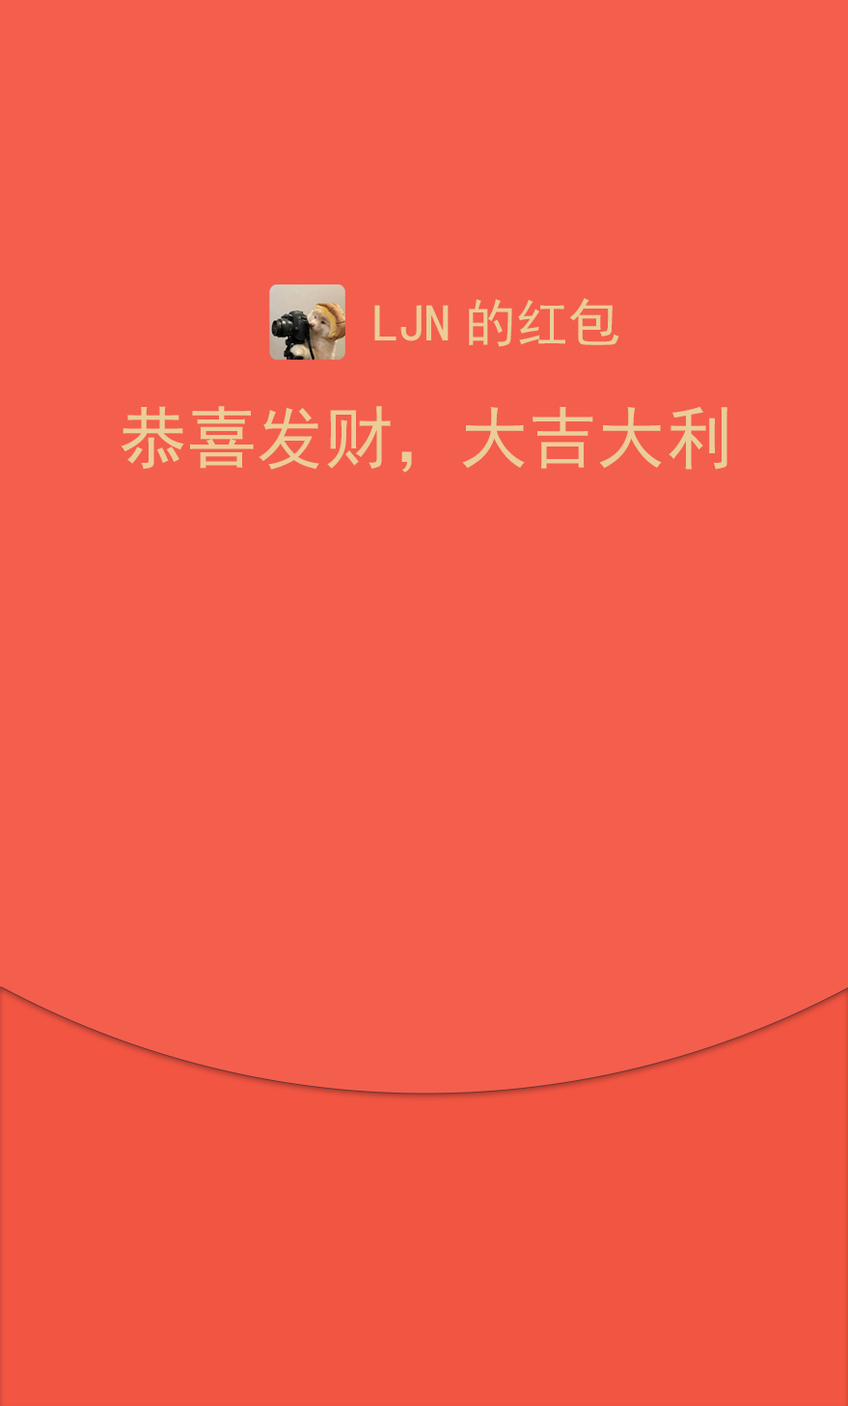
<style>
.page{position:relative;width:848px;height:1406px;background:#f45e4d}
.page>*{position:absolute;margin:0}
.t1{font:52.2px "SimHei";color:#ebcd99}
.t2{font:68.3px "SimHei";color:#ebcd99}
</style>
<div class="page">
<p class="t1" style="left:374px;top:298px;width:245px;height:49px">LJN的红包</p>
<p class="t2" style="left:121px;top:406px;width:606px;height:67px">恭喜发财， 大吉大利</p>
</div>
